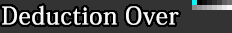
<style>
.page{position:relative;width:232px;height:33px;background:#333333}
.page>*{position:absolute;margin:0}
.t1{font:24px "KozMinPro-Medium";letter-spacing:0.025em;color:#f8f8f8}
</style>
<div class="page">
<p class="t1" style="left:2px;top:5px;width:177px;height:20px">Deduction Over</p>
</div>
